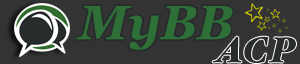
<style>
.page{position:relative;width:300px;height:64px;background:#333333}
.page>*{position:absolute;margin:0}
.t1{font:48px "Georgia-BoldItalic";color:#2d6f37}
</style>
<div class="page">
<p class="t1" style="left:76px;top:6px;width:157px;height:44px">MyBB</p>
</div>
